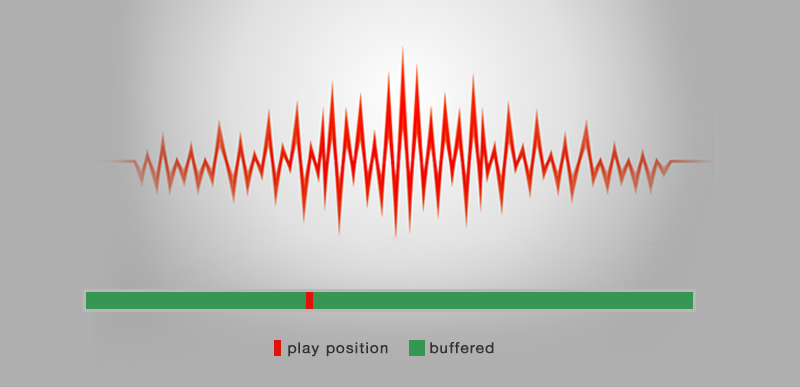
<style>
.page{position:relative;width:800px;height:387px;background:#afafaf}
.page>*{position:absolute;margin:0}
.t1{font:15px "HelveticaNeue";letter-spacing:0.06em;color:#323232;font-weight:bold}
</style>
<div class="page">
<p class="t1" style="left:288px;top:342px;width:100px;height:15px">play position</p>
<p class="t1" style="left:430px;top:342px;width:64px;height:12px">buffered</p>
</div>
